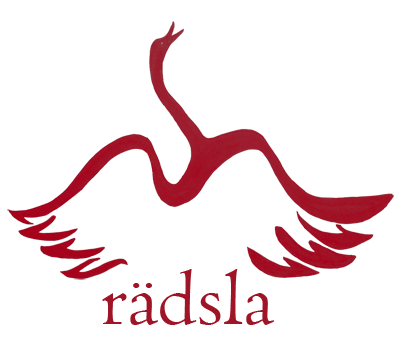
<style>
.page{position:relative;width:400px;height:361px;background:#ffffff}
.page>*{position:absolute;margin:0}
.t1{font:82px "Centaur";color:#9f1527}
</style>
<div class="page">
<p class="t1" style="left:102px;top:269px;width:172px;height:56px">rädsla</p>
</div>
